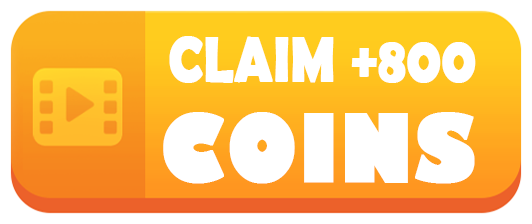
<style>
.page{position:relative;width:532px;height:224px;background:#ffffff}
.page>*{position:absolute;margin:0}
.t1{font:63.7px "BerlinSansFBDemi-Bold";color:#ffffff;font-weight:bold;scale:0.84 1}
.t2{font:90.6px "GillSans-UltraBold";color:#ffffff;font-weight:bold;scale:0.9 1}
</style>
<div class="page">
<p class="t1" style="left:169px;top:36px;width:307px;height:47px">CLAIM +800</p>
<p class="t2" style="left:163px;top:112px;width:312px;height:72px">COINS</p>
</div>
